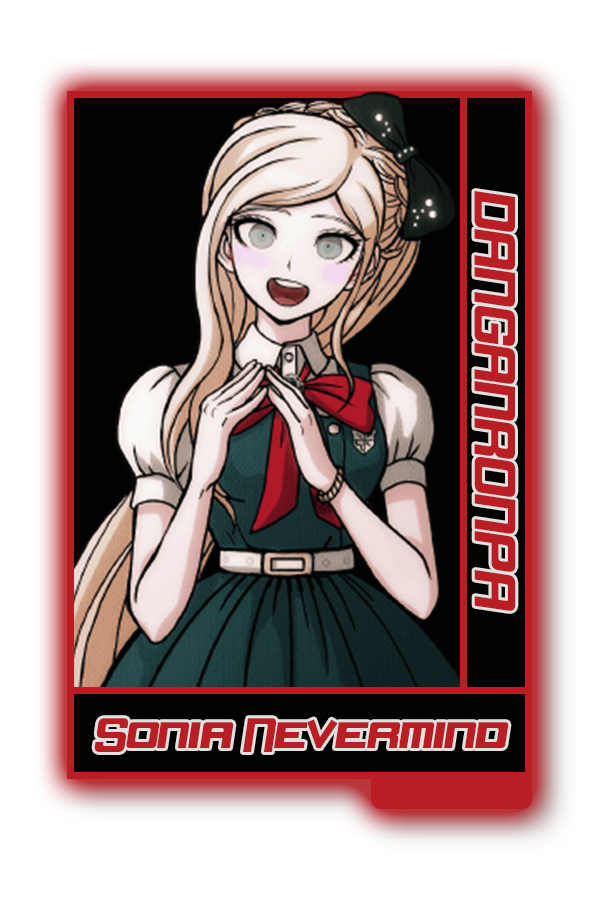
<style>
.page{position:relative;width:600px;height:900px;background:#ffffff}
.page>*{position:absolute;margin:0}
.t1{font:48.8px "DorBlue";color:#bb2c2e}
.t2{font:40.6px "DorBlue";color:#bb2c2e}
</style>
<div class="page">
<p class="t1" style="left:474px;top:191px;width:42px;height:420px;rotate:90deg">DANGANRONPA</p>
<p class="t2" style="left:94px;top:718px;width:415px;height:34px">Sonia Nevermind</p>
</div>
